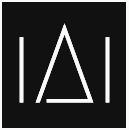
<style>
.page{position:relative;width:129px;height:130px;background:#121111}
.page>*{position:absolute;margin:0}
.t1{font:112.3px "Megrim";color:#fbf9f9}
</style>
<div class="page">
<p class="t1" style="left:19px;top:23px;width:91px;height:80px">iAi</p>
<p class="t1" style="left:19px;top:23px;width:91px;height:80px">iAi</p>
</div>
